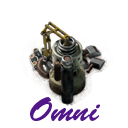
<style>
.page{position:relative;width:128px;height:128px;background:#ffffff}
.page>*{position:absolute;margin:0}
.t1{font:33.3px "BrushScriptStd";color:#511688}
</style>
<div class="page">
<p class="t1" style="left:30px;top:97px;width:70px;height:24px">Omni</p>
</div>
